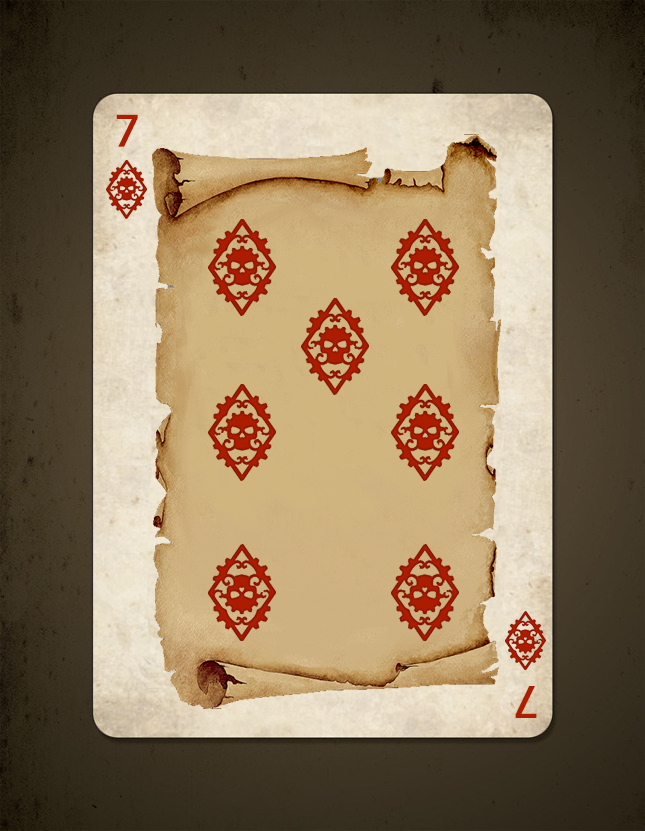
<style>
.page{position:relative;width:645px;height:831px}
.page>*{position:absolute;margin:0}
.t1{font:48px "MyriadPro-Regular";color:#ad1d01;font-weight:bold}
</style>
<div class="page">
<p class="t1" style="left:116px;top:114px;width:22px;height:33px">7</p>
<p class="t1" style="left:515px;top:686px;width:22px;height:32px;rotate:180deg">7</p>
</div>
